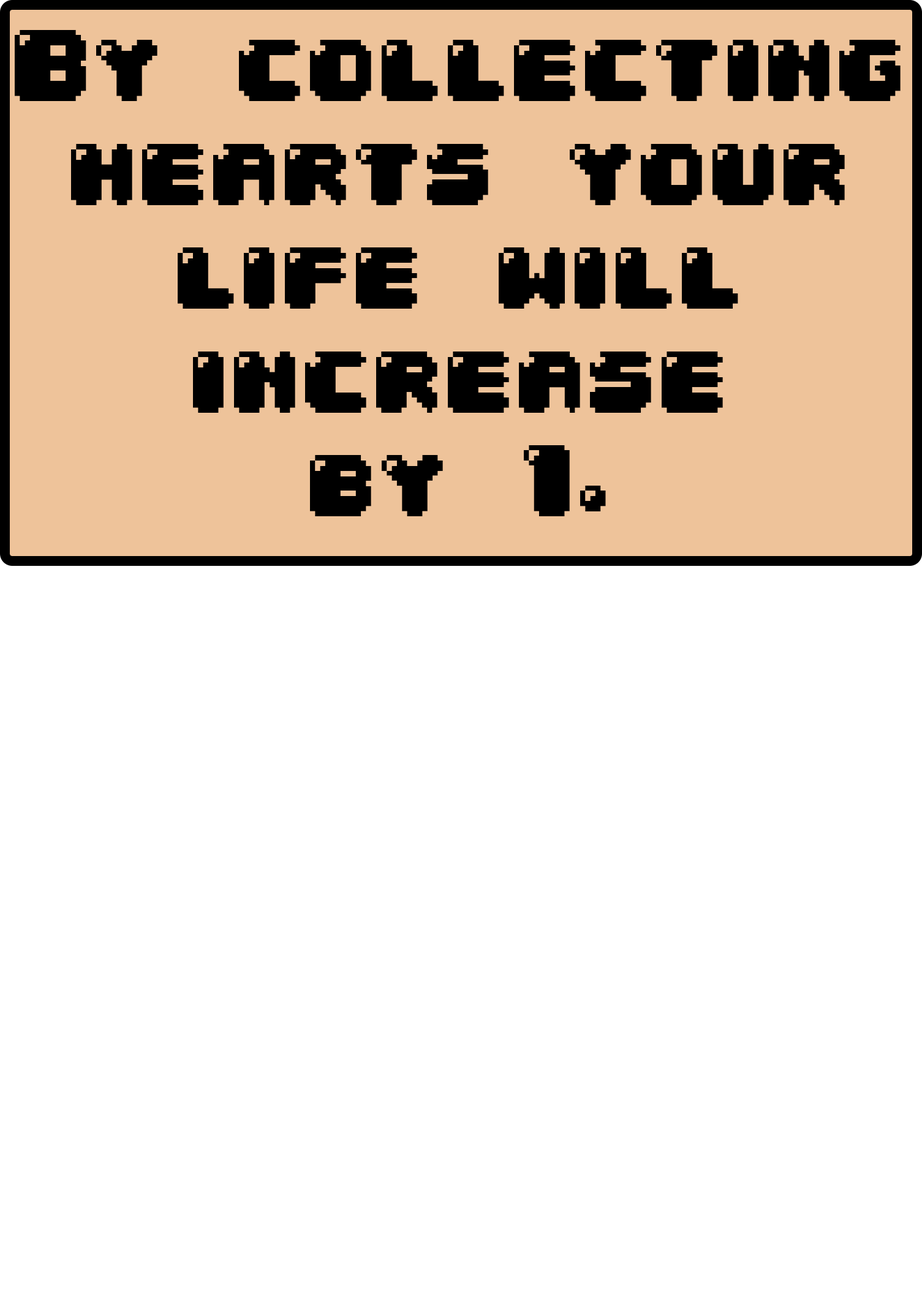
<style>
.page{position:relative;width:922px;height:1294px;background:#ffffff}
.page>*{position:absolute;margin:0}
.t1{font:86.5px "04b30";color:#000000}
</style>
<div class="page">
<p class="t1" style="left:15px;top:30px;width:885px;height:486px;text-align:center">By collecting<br>hearts your<br>life will<br>increase<br>by 1.</p>
</div>
